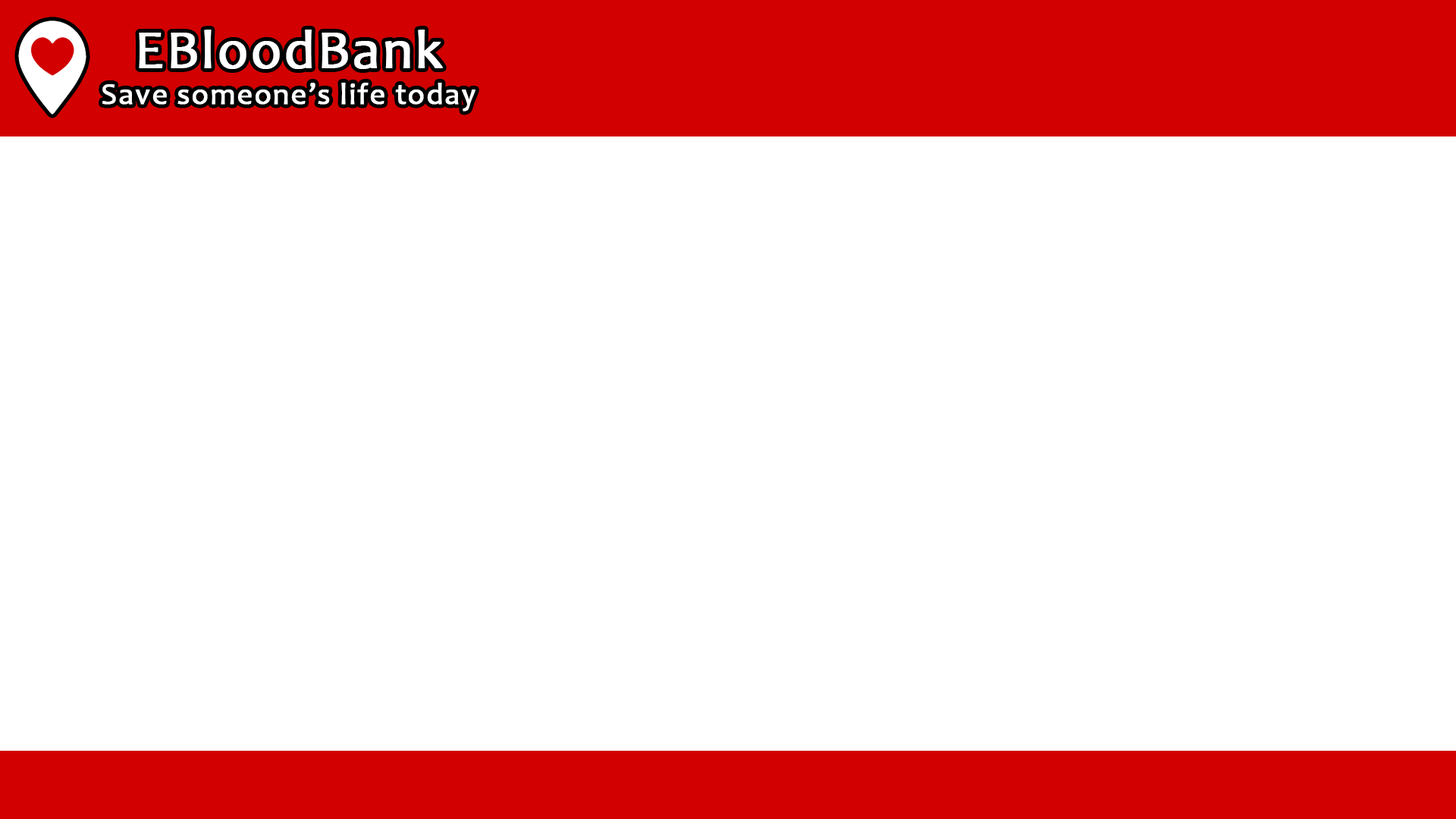
<style>
.page{position:relative;width:1456px;height:819px;background:#ffffff}
.page>*{position:absolute;margin:0}
.t1{font:30.3px "Candara";letter-spacing:0.03em;color:#ffffff;font-weight:bold}
.t2{font:54.6px "Candara";letter-spacing:0.03em;color:#ffffff;font-weight:bold}
</style>
<div class="page">
<p class="t1" style="left:102px;top:30px;width:373px;height:81px;text-align:center"><span class="t2">EBloodBank<br></span>Save someone’s life today</p>
</div>
